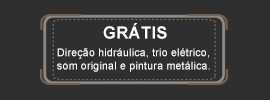
<style>
.page{position:relative;width:270px;height:100px;background:#2f2f2f}
.page>*{position:absolute;margin:0}
.t1{font:16.6px "Arial-BoldMT";letter-spacing:0.022em;color:#ffffff}
.t2{font:10.6px/13.3px "ArialMT";letter-spacing:0.022em;color:#ffffff}
</style>
<div class="page">
<p class="t1" style="left:103px;top:23px;width:64px;height:16px">GRÁTIS</p>
<p class="t2" style="left:57px;top:48px;width:153px;height:24px">Direção hidráulica, trio elétrico, som original e pintura metálica.</p>
</div>
